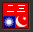
<style>
.page{position:relative;width:33px;height:32px;background:#f20000}
.page>*{position:absolute;margin:0}
.t1{font:10.4px "SimSun";color:#ffffff}
</style>
<div class="page">
<p class="t1" style="left:7px;top:5px;width:18px;height:7px">二三</p>
</div>
